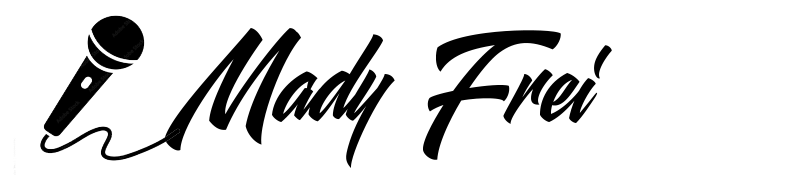
<style>
.page{position:relative;width:804px;height:175px;background:#ffffff}
.page>*{position:absolute;margin:0}
.t1{font:114px "AnacondaWildstylePERSONAL-Regular";color:#000000}
</style>
<div class="page">
<p class="t1" style="left:164px;top:28px;width:448px;height:140px">Mady Frei</p>
</div>
